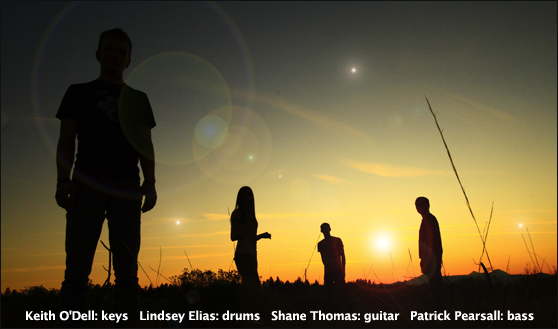
<style>
.page{position:relative;width:558px;height:329px}
.page>*{position:absolute;margin:0}
.t1{font:12px "LucidaGrande-Bold";letter-spacing:-0.025em;color:#ffffff}
</style>
<div class="page">
<p class="t1" style="left:26px;top:310px;width:508px;height:13px">Keith O'Dell: keys   Lindsey Elias: drums   Shane Thomas: guitar   Patrick Pearsall: bass</p>
</div>
